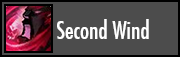
<style>
.page{position:relative;width:180px;height:57px;background:#4c4c4c}
.page>*{position:absolute;margin:0}
.t1{font:24px "FuturaCondensed";color:#ffffff}
</style>
<div class="page">
<p class="t1" style="left:57px;top:19px;width:92px;height:20px">Second Wind</p>
</div>
